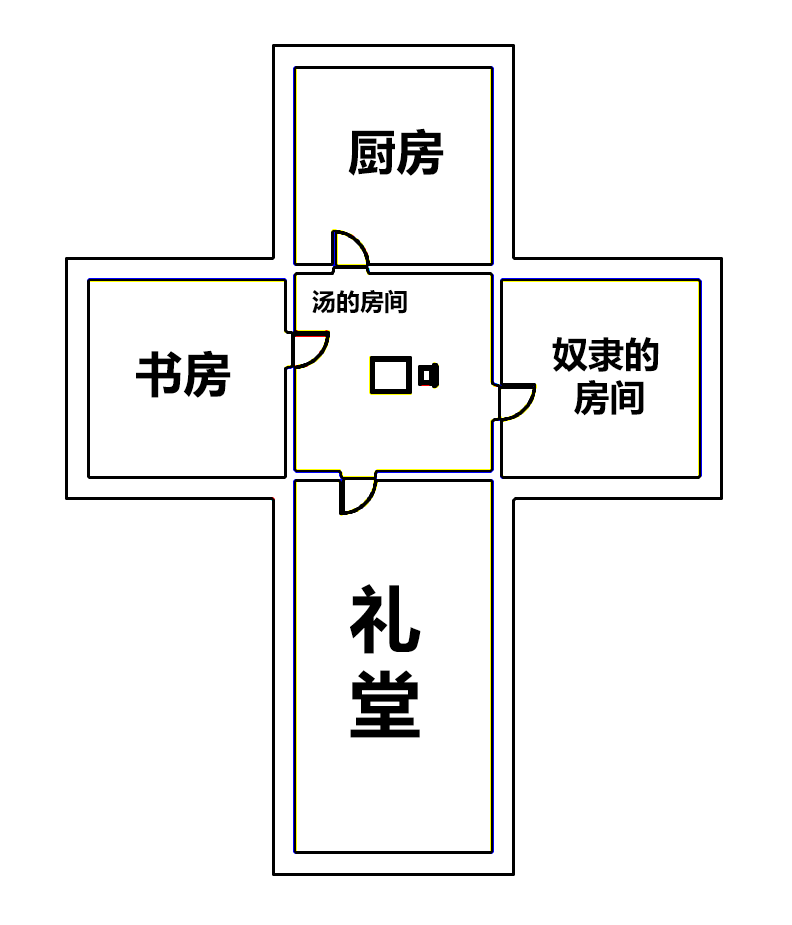
<style>
.page{position:relative;width:792px;height:925px;background:#ffffff}
.page>*{position:absolute;margin:0}
.t1{font:48px "MicrosoftYaHei-Bold";color:#000000}
.t2{font:24px "MicrosoftYaHei-Bold";color:#000000}
.t3{font:36px "MicrosoftYaHei-Bold";color:#000000}
.t4{font:72px "MicrosoftYaHei-Bold";color:#000000}
</style>
<div class="page">
<p class="t1" style="left:348px;top:128px;width:96px;height:48px">厨房</p>
<p class="t2" style="left:312px;top:289px;width:95px;height:25px">汤的房间</p>
<p class="t3" style="left:552px;top:337px;width:107px;height:79px">奴隶的<br>  房间</p>
<p class="t1" style="left:136px;top:350px;width:95px;height:48px">书房</p>
<p class="t4" style="left:350px;top:584px;width:71px;height:154px">礼<br>堂</p>
</div>
